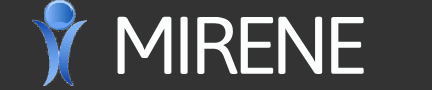
<style>
.page{position:relative;width:432px;height:90px;background:#333333}
.page>*{position:absolute;margin:0}
.t1{font:81.3px "Asap-Regular";letter-spacing:-0.075em;color:#fcfdfd;text-transform:uppercase}
.t2{font:81.3px "Asap-Regular";color:#fcfdfd;text-transform:uppercase}
</style>
<div class="page">
<p class="t1" style="left:117px;top:16px;width:247px;height:59px">miren<span class="t2">e</span></p>
</div>
